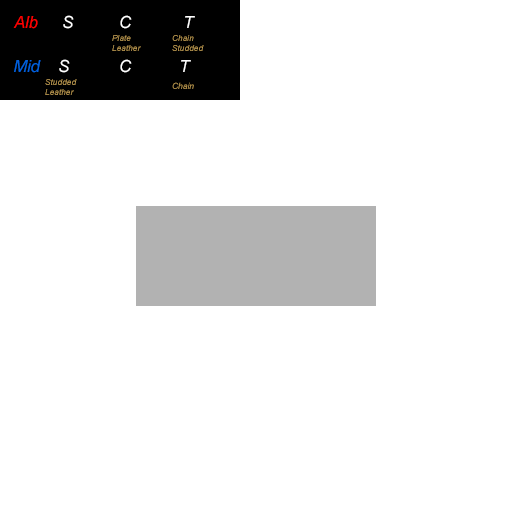
<style>
.page{position:relative;width:512px;height:512px;background:#ffffff}
.page>*{position:absolute;margin:0}
.t1{font:16.7px "Arial-ItalicMT";color:#ff0000}
.t2{font:16.7px "Arial-ItalicMT";color:#ffffff}
.t3{font:8.3px "Arial-ItalicMT";color:#be9b53}
.t4{font:16.7px "Arial-ItalicMT";color:#0061dd}
.t5{font:8.5px "Arial-ItalicMT"}
</style>
<div class="page">
<p class="t1" style="left:13px;top:16px;width:25px;height:13px">Alb</p>
<p class="t2" style="left:63px;top:15px;width:11px;height:14px">S</p>
<p class="t2" style="left:120px;top:15px;width:12px;height:14px">C</p>
<p class="t2" style="left:185px;top:16px;width:10px;height:12px">T</p>
<p class="t3" style="left:112px;top:35px;width:29px;height:16px">Plate<br>Leather</p>
<p class="t3" style="left:172px;top:35px;width:32px;height:16px">Chain<br>Studded</p>
<p class="t4" style="left:14px;top:60px;width:27px;height:13px">Mid</p>
<p class="t2" style="left:59px;top:59px;width:11px;height:14px">S</p>
<p class="t2" style="left:120px;top:59px;width:12px;height:14px">C</p>
<p class="t2" style="left:181px;top:60px;width:10px;height:12px">T</p>
<p class="t3" style="left:45px;top:79px;width:32px;height:16px">Studded<br>Leather</p>
<p class="t5" style="left:172px;top:82px;width:22px;height:7px">Chain</p>
</div>
